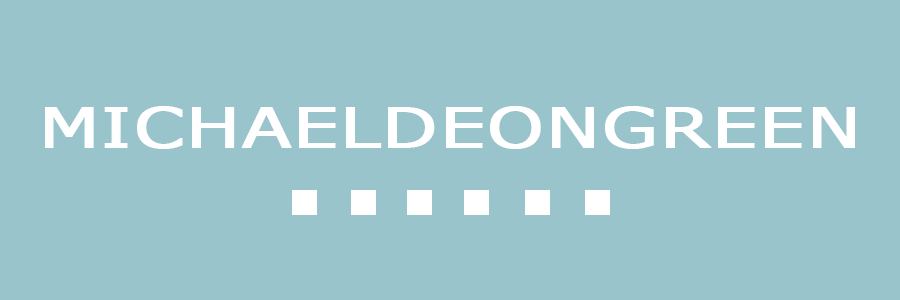
<style>
.page{position:relative;width:900px;height:300px;background:#9ac4cc}
.page>*{position:absolute;margin:0}
.t1{font:55.2px "MSReferenceSansSerif";color:#ffffff;text-transform:uppercase;font-weight:bold;scale:1.3 1}
</style>
<div class="page">
<p class="t1" style="left:45px;top:106px;width:810px;height:43px">michaeldeongreen</p>
</div>
